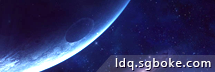
<style>
.page{position:relative;width:215px;height:72px}
.page>*{position:absolute;margin:0}
.t1{font:12px "SegoeUISymbol";letter-spacing:0.08em;color:#ffffff}
</style>
<div class="page">
<p class="t1" style="left:115px;top:58px;width:96px;height:12px">ldq.sgboke.com</p>
</div>
